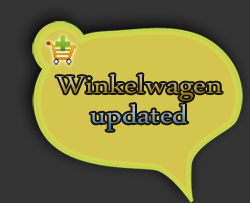
<style>
.page{position:relative;width:250px;height:203px;background:#333333}
.page>*{position:absolute;margin:0}
.t1{font:36px/30px "DaunPenh";scale:1.2 1}
</style>
<div class="page">
<p class="t1" style="left:56px;top:74px;width:166px;height:57px;text-align:center">Winkelwagen<br>updated</p>
</div>
